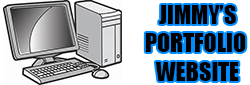
<style>
.page{position:relative;width:250px;height:85px;background:#ffffff}
.page>*{position:absolute;margin:0}
.t1{font:24px "Impact";color:#000000}
</style>
<div class="page">
<p class="t1" style="left:145px;top:5px;width:101px;height:76px;text-align:center">JIMMY’S<br>PORTFOLIO <br>WEBSITE</p>
</div>
